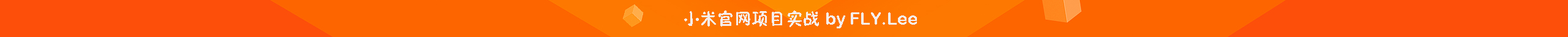
<style>
.page{position:relative;width:1568px;height:37px;background:#fd4f0a}
.page>*{position:absolute;margin:0}
.t1{font:17.2px "ArialRoundedMTBold";color:#f5eeef}
.t2{font:17.2px "FZSEJW--GB1-0";color:#f5eeef}
</style>
<div class="page">
<p class="t1" style="left:684px;top:10px;width:233px;height:18px"><span class="t2">小米官网项目实战 </span>by FLY.Lee</p>
</div>
